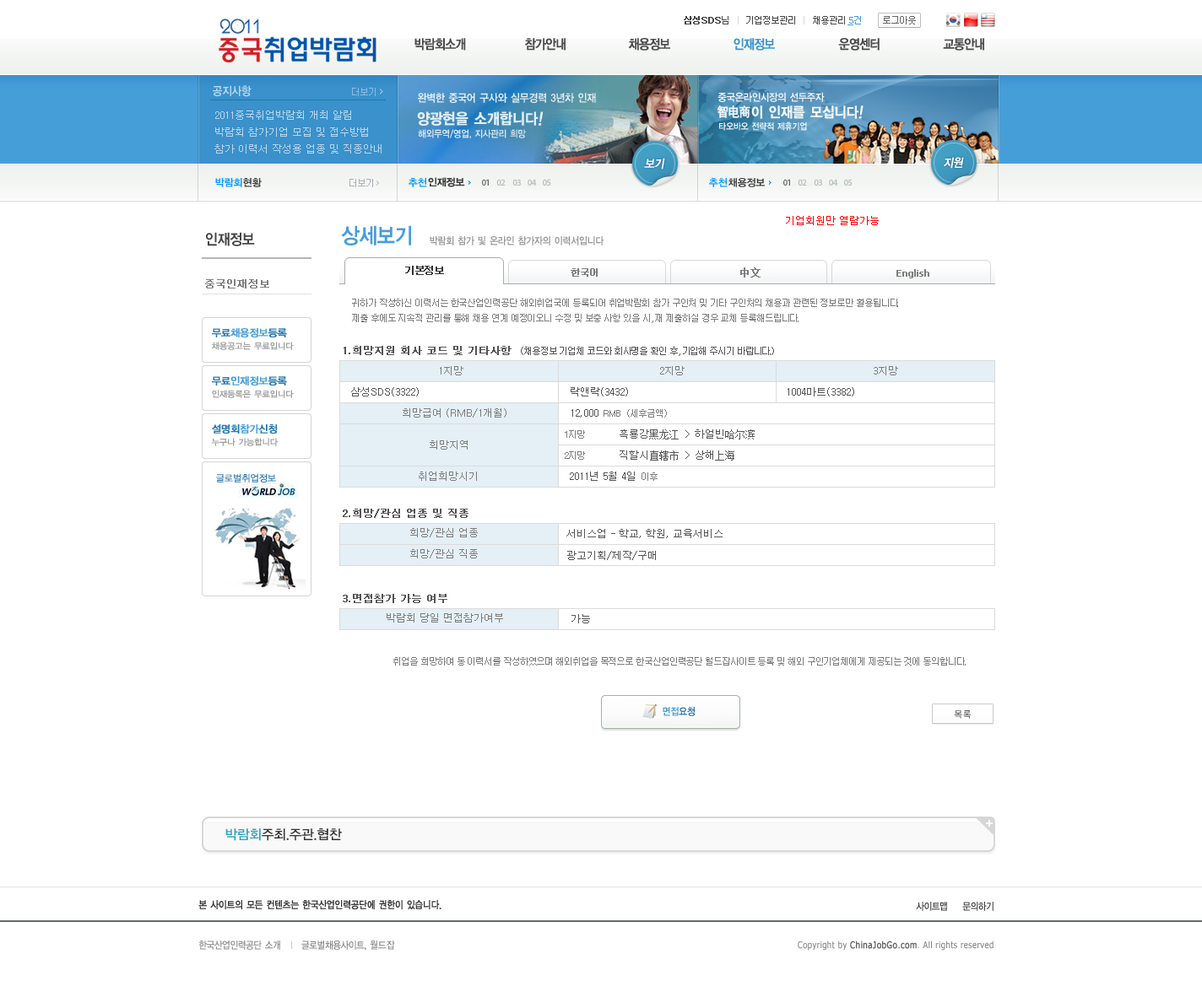
<style>
.page{position:relative;width:1202px;height:992px;background:#ffffff}
.page>*{position:absolute;margin:0}
.t1{font:9.3px "Dotum";letter-spacing:-0.1em;color:#464646}
.t2{font:9.3px "Dotum";letter-spacing:-0.1em;color:#464646;font-weight:bold}
.t3{font:9.3px "Dotum";letter-spacing:-0.1em;color:#d6d6d6}
.t4{font:9.3px "Dotum";letter-spacing:-0.1em;color:#666666}
.t5{font:9.3px "Dotum";color:#4298d5;text-decoration:underline}
.t6{font:9.3px "Dotum";color:#4298d5}
.t7{font:13.5px "YDIYGO130-KSCpc-EUC-H";letter-spacing:-0.14em;color:#4a4a4a;font-weight:bold;scale:0.86 1}
.t8{font:13.5px "YDIYGO130-KSCpc-EUC-H";letter-spacing:-0.14em;color:#3e95cf;font-weight:bold;scale:0.86 1}
.t9{font:11.8px "YDIYGO140-KSCpc-EUC-H";letter-spacing:-0.1em;color:#b9d7ef;scale:0.9 1}
.t10{font:11.1px "YDIYGO140-KSCpc-EUC-H";letter-spacing:-0.1em;color:#e4eef4;scale:0.9 1}
.t11{font:10.5px "YDIYGO140-KSCpc-EUC-H";letter-spacing:-0.1em;color:#f0f5f8;scale:0.9 1}
.t12{font:10.1px/16.9px "Dotum";color:#b9d7ef}
.t13{font:15.3px "YDIYGO140-KSCpc-EUC-H";letter-spacing:-0.1em;color:#e4eef4;font-weight:bold;scale:0.9 1}
.t14{font:15.3px "YDIYGO140-KSCpc-EUC-H";letter-spacing:-0.1em;color:#e4eef4;font-weight:bold;font-style:italic;scale:0.9 1}
.t15{font:13.1px "SimHei";letter-spacing:-0.1em;color:#f0f5f8;font-weight:bold;scale:0.9 1}
.t16{font:14.4px "YDIYGO140-KSCpc-EUC-H";letter-spacing:-0.1em;color:#f0f5f8;font-weight:bold;scale:0.9 1}
.t17{font:14.4px "YDIYGO140-KSCpc-EUC-H";letter-spacing:-0.1em;color:#f0f5f8;font-weight:bold;font-style:italic;scale:0.9 1}
.t18{font:9.2px "YDIYGO140-KSCpc-EUC-H";letter-spacing:-0.1em;color:#f0f5f8;scale:0.9 1}
.t19{font:9.7px "YDIYGO140-KSCpc-EUC-H";letter-spacing:-0.1em;color:#dde8ef;scale:0.9 1}
.t20{font:11.8px "YDIYGO130-KSCpc-EUC-H";letter-spacing:-0.1em;color:#ffffff;font-weight:bold;font-style:italic;scale:0.9 1}
.t21{font:10.1px "YDIYGO140-KSCpc-EUC-H";letter-spacing:-0.1em;color:#0099ff}
.t22{font:10.1px "YDIYGO140-KSCpc-EUC-H";letter-spacing:-0.1em;color:#3e3e3e}
.t23{font:10.1px "Dotum";color:#ff0000}
.t24{font:15.2px "YDIYGO140-KSCpc-EUC-H";letter-spacing:-0.1em;color:#454545;scale:0.9 1}
.t25{font:21.9px "YDIYGO140-KSCpc-EUC-H";letter-spacing:-0.1em;color:#469ed9;scale:0.9 1}
.t26{font:10.1px "YDIYGO140-KSCpc-EUC-H";letter-spacing:-0.1em;color:#999999;scale:0.9 1}
.t27{font:10.1px "Dotum";letter-spacing:-0.1em;color:#333333;font-weight:bold}
.t28{font:9.3px "Dotum";letter-spacing:-0.1em;color:#7d7d7d;font-weight:bold}
.t29{font:10.1px "SimSun";color:#7d7d7d;font-weight:bold}
.t30{font:9.3px "Tahoma";color:#7d7d7d;font-weight:bold}
.t31{font:10.1px "Dotum";color:#808080;font-weight:bold}
.t32{font:9.3px/15.2px "Dotum";letter-spacing:-0.1em;color:#7d7d7d}
.t33{font:10.1px "YDIYGO130-KSCpc-EUC-H";letter-spacing:-0.1em;color:#469ed9;font-weight:bold}
.t34{font:10.1px "YDIYGO130-KSCpc-EUC-H";letter-spacing:-0.1em;color:#2476ad;font-weight:bold}
.t35{font:8.4px "YDIYGO130-KSCpc-EUC-H";letter-spacing:-0.1em;color:#a1a1a1;font-weight:bold}
.t36{font:10.1px "Dotum";color:#555555;font-weight:bold}
.t37{font:9.3px "Dotum";letter-spacing:-0.1em;color:#555555}
.t38{font:10.1px "Dotum";color:#7d7d7d}
.t39{font:10.1px "Dotum";color:#555555}
.t40{font:9.3px "Dotum";letter-spacing:-0.1em;color:#7d7d7d}
.t41{font:10.1px "SimSun";color:#555555}
.t42{font:9.3px "YDIYGO120-KSCpc-EUC-H";letter-spacing:-0.1em;color:#2f7cb1;font-weight:bold}
.t43{font:10.1px "YDIYGO140-KSCpc-EUC-H";letter-spacing:-0.1em;color:#469ed9;scale:0.9 1}
.t44{font:10.1px "YDIYGO140-KSCpc-EUC-H";letter-spacing:-0.1em;color:#2677ae;scale:0.9 1}
.t45{font:9.3px "YDIYGO130-KSCpc-EUC-H";letter-spacing:0.05em;color:#5d5b5b;scale:0.9 1}
.t46{font:13.5px "YDIYGO130-KSCpc-EUC-H";letter-spacing:-0.1em;color:#323131}
.t47{font:13.5px "YDIYGO130-KSCpc-EUC-H";letter-spacing:-0.1em;color:#2ea2c2}
.t48{font:10.1px "YDIYGO130-KSCpc-EUC-H";letter-spacing:-0.1em;color:#373737;font-weight:bold;scale:0.86 1}
.t49{font:10.1px "YDIYGO130-KSCpc-EUC-H";letter-spacing:-0.1em;color:#373737;scale:0.86 1}
.t50{font:10.1px "YDIYGO130-KSCpc-EUC-H";letter-spacing:-0.1em;color:#868686;scale:0.86 1}
.t51{font:10.1px "YDIYGO130-KSCpc-EUC-H";letter-spacing:-0.05em;color:#868686;scale:0.86 1}
.t52{font:9.3px "Tahoma";letter-spacing:0.05em;color:#868686;scale:0.86 1}
.t53{font:9.3px "Tahoma";letter-spacing:0.05em;color:#626262;font-weight:bold;scale:0.86 1}
</style>
<div class="page">
<p class="t1" style="left:684px;top:16px;width:232px;height:8px"><span class="t2">삼성SDS</span>님   <span class="t3">| </span>  기업정보관리   <span class="t3">| </span>  채용관리               <span class="t4">로그아웃</span></p>
<p class="t5" style="left:847px;top:16px;width:14px;height:9px">5<span class="t6">건</span></p>
<p class="t7" style="left:414px;top:38px;width:52px;height:13px">박람회소개</p>
<p class="t7" style="left:525px;top:38px;width:40px;height:13px">참가안내</p>
<p class="t7" style="left:628px;top:38px;width:42px;height:13px">채용정보</p>
<p class="t8" style="left:733px;top:38px;width:42px;height:13px">인재정보</p>
<p class="t7" style="left:838px;top:38px;width:41px;height:13px">운영센터</p>
<p class="t7" style="left:943px;top:38px;width:41px;height:13px">교통안내</p>
<p class="t9" style="left:213px;top:85px;width:38px;height:12px">공지사항</p>
<p class="t10" style="left:418px;top:93px;width:178px;height:10px">완벽한 중국어 구사와 실무경력 3년차 인재</p>
<p class="t11" style="left:717px;top:92px;width:107px;height:10px">중국온라인시장의 선두주자</p>
<p class="t12" style="left:214px;top:111px;width:167px;height:43px">2011중국취업박람회 개최 알림<br>박람회 참가기업 모집 및 접수방법<br>참가 이력서 작성용 업종 및 직종안내</p>
<p class="t13" style="left:417px;top:111px;width:126px;height:15px">양광현을 소개합니다<span class="t14">!</span></p>
<p class="t15" style="left:717px;top:105px;width:33px;height:13px">智电商</p>
<p class="t16" style="left:751px;top:105px;width:112px;height:14px">이 인재를 모십니다<span class="t17">!</span></p>
<p class="t18" style="left:719px;top:122px;width:88px;height:9px">타오바오 전략적 제휴기업</p>
<p class="t19" style="left:418px;top:129px;width:108px;height:10px">해외무역/영업, 지사관리 희망</p>
<p class="t20" style="left:644px;top:158px;width:21px;height:12px">보기</p>
<p class="t20" style="left:943px;top:157px;width:21px;height:12px">지원</p>
<p class="t21" style="left:215px;top:178px;width:27px;height:9px">박람회</p>
<p class="t22" style="left:243px;top:178px;width:19px;height:9px">현황</p>
<p class="t21" style="left:408px;top:178px;width:19px;height:9px">추천</p>
<p class="t22" style="left:428px;top:177px;width:37px;height:10px">인재정보</p>
<p class="t21" style="left:709px;top:178px;width:18px;height:9px">추천</p>
<p class="t22" style="left:728px;top:178px;width:37px;height:9px">채용정보</p>
<p class="t23" style="left:786px;top:216px;width:92px;height:9px">기업회원만 열람가능</p>
<p class="t24" style="left:206px;top:232px;width:49px;height:14px">인재정보</p>
<p class="t25" style="left:341px;top:225px;width:70px;height:21px">상세보기</p>
<p class="t26" style="left:430px;top:236px;width:174px;height:10px">박람회 참가 및 온라인 참가자의 이력서입니다</p>
<p class="t27" style="left:405px;top:266px;width:39px;height:9px">기본정보</p>
<p class="t28" style="left:570px;top:268px;width:27px;height:9px">한국어</p>
<p class="t29" style="left:740px;top:267px;width:20px;height:11px">中文</p>
<p class="t30" style="left:896px;top:269px;width:33px;height:9px">English</p>
<p class="t31" style="left:205px;top:279px;width:64px;height:10px">중국인재정보</p>
<p class="t32" style="left:352px;top:299px;width:546px;height:24px">귀하가 작성하신 이력서는 한국산업인력공단 해외취업국에 등록되어 취업박람회 참가 구인처 및 기타 구인처의 채용과 관련된 정보로만 활용됩니다.  <br>제출 후에도 지속적 관리를 통해 채용 연계 예정이오니 수정 및 보충 사항 있을 시, 재 제출하실 경우 교체 등록해드립니다.</p>
<p class="t33" style="left:212px;top:328px;width:75px;height:10px"><span class="t34">무료</span>채용정보<span class="t34">등록</span></p>
<p class="t35" style="left:211px;top:342px;width:83px;height:8px">채용공고는 무료입니다</p>
<p class="t36" style="left:343px;top:346px;width:168px;height:9px">1.희망지원 회사 코드 및 기타사항</p>
<p class="t37" style="left:521px;top:347px;width:253px;height:9px">(채용정보 기업체 코드와 회사명을 확인 후, 기입해 주시기 바랍니다.)</p>
<p class="t33" style="left:212px;top:376px;width:75px;height:10px"><span class="t34">무료</span>인재정보<span class="t34">등록</span></p>
<p class="t38" style="left:440px;top:366px;width:23px;height:10px">1지망</p>
<p class="t38" style="left:660px;top:366px;width:24px;height:10px">2지망</p>
<p class="t38" style="left:873px;top:366px;width:25px;height:10px">3지망</p>
<p class="t35" style="left:212px;top:390px;width:82px;height:8px">인재등록은 무료입니다</p>
<p class="t39" style="left:351px;top:387px;width:68px;height:10px">삼성SDS(3322)</p>
<p class="t39" style="left:570px;top:387px;width:58px;height:10px">락앤락(3432)</p>
<p class="t39" style="left:787px;top:387px;width:67px;height:10px">1004마트(3382)</p>
<p class="t38" style="left:403px;top:408px;width:103px;height:10px">희망급여 (RMB/1개월)</p>
<p class="t39" style="left:571px;top:409px;width:27px;height:9px">12,000</p>
<p class="t40" style="left:603px;top:409px;width:64px;height:9px">RMB   (세후금액)</p>
<p class="t34" style="left:212px;top:424px;width:65px;height:10px">설명회<span class="t33">참가</span>신청</p>
<p class="t35" style="left:211px;top:438px;width:67px;height:8px">누구나 가능합니다</p>
<p class="t40" style="left:565px;top:430px;width:20px;height:9px">1지망</p>
<p class="t39" style="left:619px;top:430px;width:59px;height:10px">흑룡강<span class="t41">黑龙江</span></p>
<p class="t39" style="left:685px;top:430px;width:69px;height:10px">&gt; 하얼빈<span class="t41">哈尔滨</span></p>
<p class="t38" style="left:430px;top:440px;width:37px;height:10px">희망지역</p>
<p class="t40" style="left:565px;top:451px;width:20px;height:9px">2지망</p>
<p class="t39" style="left:619px;top:451px;width:59px;height:10px">직할시<span class="t41">直辖市</span></p>
<p class="t39" style="left:685px;top:451px;width:49px;height:10px">&gt; 상해<span class="t41">上海</span></p>
<p class="t42" style="left:216px;top:473px;width:60px;height:10px">글로벌취업정보</p>
<p class="t38" style="left:419px;top:472px;width:58px;height:9px">취업희망시기</p>
<p class="t39" style="left:570px;top:472px;width:65px;height:9px">2011년 5월 4일</p>
<p class="t40" style="left:641px;top:473px;width:16px;height:8px">이후</p>
<p class="t36" style="left:343px;top:509px;width:125px;height:9px">2.희망/관심 업종 및 직종</p>
<p class="t38" style="left:410px;top:528px;width:68px;height:10px">희망/관심 업종</p>
<p class="t39" style="left:566px;top:529px;width:156px;height:9px">서비스업 - 학교, 학원, 교육서비스</p>
<p class="t38" style="left:410px;top:549px;width:68px;height:10px">희망/관심 직종</p>
<p class="t39" style="left:567px;top:551px;width:89px;height:9px">광고기획/제작/구매</p>
<p class="t36" style="left:343px;top:594px;width:104px;height:9px">3.면접참가 가능 여부</p>
<p class="t38" style="left:386px;top:613px;width:117px;height:10px">박람회 당일 면접참가여부</p>
<p class="t39" style="left:571px;top:614px;width:19px;height:10px">가능</p>
<p class="t40" style="left:393px;top:657px;width:572px;height:9px">취업을 희망하여 동 이력서를 작성하였으며 해외취업을 목적으로 한국산업인력공단 월드잡사이트 등록 및 해외 구인기업체에게 제공되는 것에 동의합니다.</p>
<p class="t43" style="left:662px;top:707px;width:33px;height:9px">면접<span class="t44">요청</span></p>
<p class="t45" style="left:954px;top:711px;width:16px;height:8px">목록</p>
<p class="t46" style="left:225px;top:829px;width:117px;height:12px"><span class="t47">박람회</span>주최.주관.협찬</p>
<p class="t48" style="left:198px;top:900px;width:243px;height:10px">본 사이트의 모든 컨텐츠는 한국산업인력공단에 권한이 있습니다.</p>
<p class="t49" style="left:916px;top:902px;width:31px;height:9px">사이트맵</p>
<p class="t49" style="left:962px;top:902px;width:31px;height:9px">문의하기</p>
<p class="t50" style="left:199px;top:941px;width:196px;height:10px">한국산업인력공단 소개      글로벌채용사이트, <span class="t51">월드잡</span></p>
<p class="t52" style="left:797px;top:941px;width:196px;height:10px">Copyright by <span class="t53">ChinaJobGo.com</span>. All rights reserved</p>
</div>
